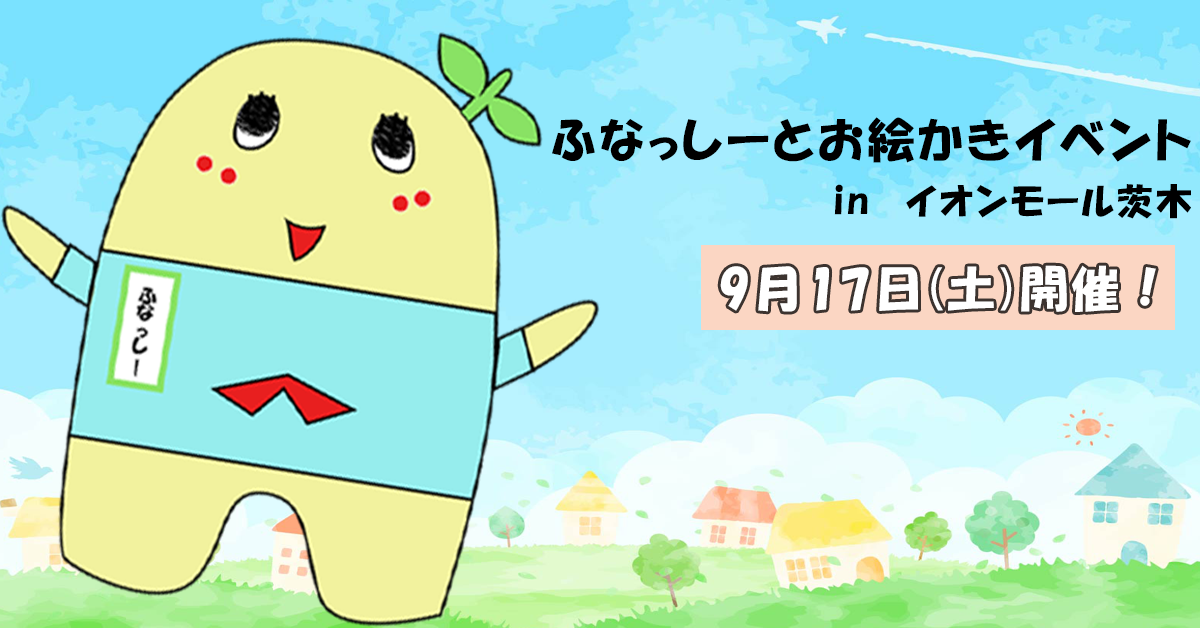
<style>
.page{position:relative;width:1200px;height:628px}
.page>*{position:absolute;margin:0}
.t1{font:48px "HGPSoeiKakupoptai";letter-spacing:0.075em;color:#000000}
.t2{font:36px "HGPSoeiKakupoptai";letter-spacing:0.075em;color:#000000}
.t3{font:48px "HGPSoeiKakupoptai";letter-spacing:0.075em;color:#ffffff}
</style>
<div class="page">
<p class="t1" style="left:552px;top:117px;width:639px;height:46px">ふなっしーとお絵かきイベント</p>
<p class="t2" style="left:834px;top:184px;width:357px;height:35px">in イオンモール茨木</p>
<p class="t3" style="left:720px;top:265px;width:436px;height:47px">9月17日(土)開催！</p>
</div>
